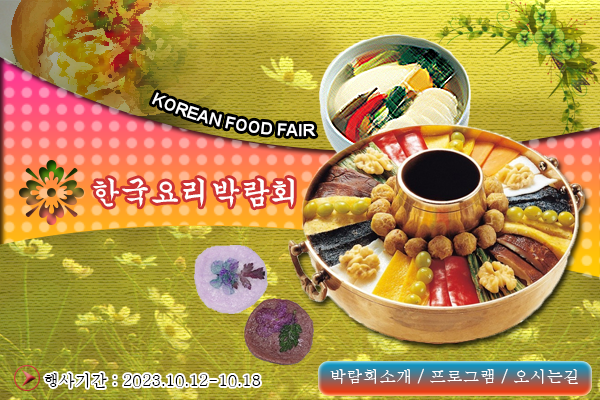
<style>
.page{position:relative;width:600px;height:400px}
.page>*{position:absolute;margin:0}
.t1{font:16px "Arial-BoldMT";color:#ffffff}
.t2{font:29.6px "Gungsuh";color:#ffffff}
.t3{font:15.8px "Batang";color:#000000}
.t4{font:16.3px "Batang";color:#ffffff}
</style>
<div class="page">
<p class="t1" style="left:151px;top:92px;width:165px;height:45px;rotate:11deg">KOREAN FOOD FAIR</p>
<p class="t2" style="left:93px;top:178px;width:201px;height:30px">한국요리박람회</p>
<p class="t3" style="left:44px;top:373px;width:217px;height:15px">행사기간 : 2023.10.12-10.18</p>
<p class="t4" style="left:330px;top:368px;width:248px;height:16px">박람회소개 / 프로그램 / 오시는길</p>
</div>
